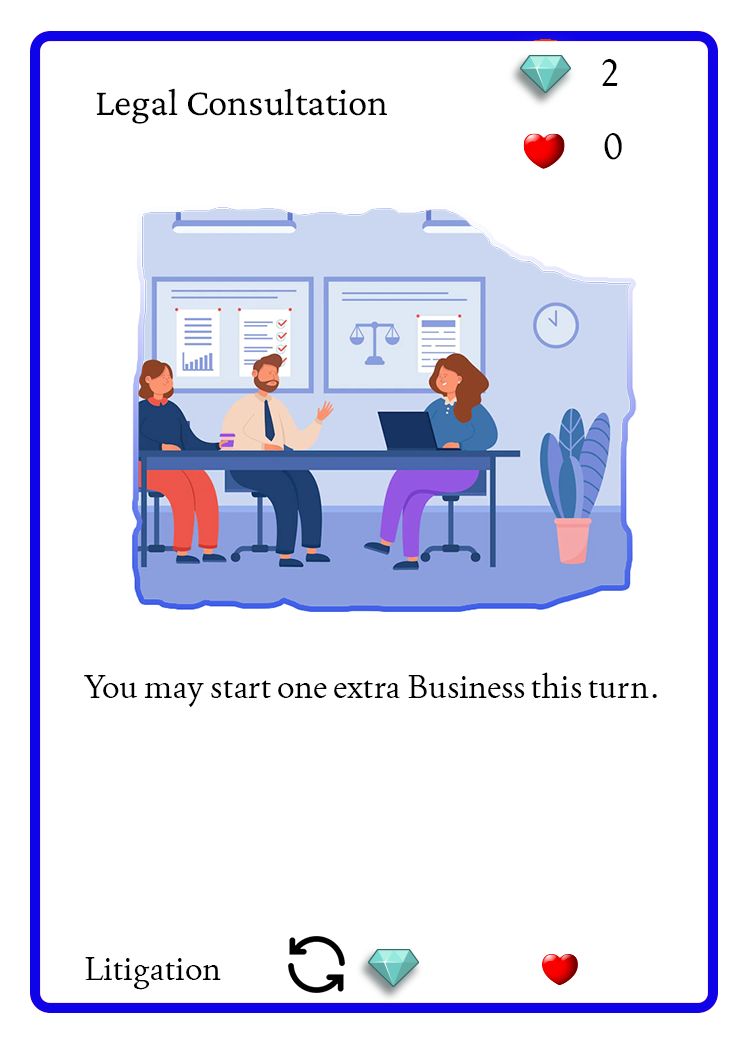
<style>
.page{position:relative;width:750px;height:1050px;background:#ffffff}
.page>*{position:absolute;margin:0}
.t1{font:37.5px "Joan-Regular";color:#000000;text-transform:uppercase}
.t2{font:38.9px "CrimsonPro-Regular";color:#000000}
.t3{font:33.3px "Joan-Regular";color:#000000}
</style>
<div class="page">
<p class="t1" style="left:602px;top:59px;width:16px;height:27px">2</p>
<p class="t2" style="left:96px;top:88px;width:291px;height:36px">Legal Consultation</p>
<p class="t1" style="left:604px;top:133px;width:18px;height:27px">0</p>
<p class="t3" style="left:84px;top:672px;width:573px;height:36px">You may start one extra Business this turn.</p>
<p class="t3" style="left:85px;top:957px;width:136px;height:33px">Litigation</p>
</div>
